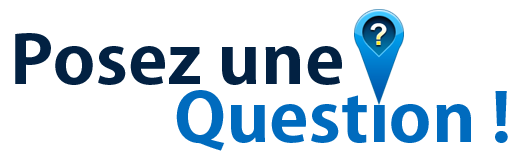
<style>
.page{position:relative;width:522px;height:167px;background:#ffffff}
.page>*{position:absolute;margin:0}
.t1{font:66.2px "AdobeGothicStd-Bold";color:#022142;scale:1.09 1}
.t2{font:66.2px "AdobeGothicStd-Bold";color:#006bbe;scale:1.09 1}
</style>
<div class="page">
<p class="t1" style="left:15px;top:33px;width:327px;height:52px">Posez une</p>
<p class="t2" style="left:176px;top:90px;width:332px;height:61px">Question !</p>
</div>
